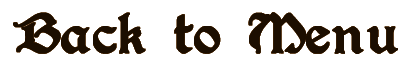
<style>
.page{position:relative;width:414px;height:67px;background:#ffffff}
.page>*{position:absolute;margin:0}
.t1{font:63.5px "Augusta-Regular";color:#1c0e00;font-weight:bold}
</style>
<div class="page">
<p class="t1" style="left:13px;top:12px;width:385px;height:42px">Back to Menu</p>
<p class="t1" style="left:13px;top:12px;width:385px;height:42px">Back to Menu</p>
<p class="t1" style="left:13px;top:12px;width:385px;height:42px">Back to Menu</p>
</div>
